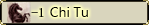
<style>
.page{position:relative;width:149px;height:25px;background:#d9d5bd}
.page>*{position:absolute;margin:0}
.t1{font:14px "LaoUI";color:#000000}
</style>
<div class="page">
<p class="t1" style="left:50px;top:7px;width:38px;height:10px">Chi Tu</p>
</div>
